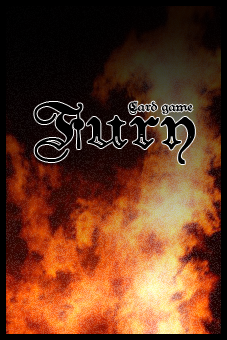
<style>
.page{position:relative;width:227px;height:340px}
.page>*{position:absolute;margin:0}
.t1{font:52px "TeutonicNo3-DemiBold";color:#000000;font-weight:bold}
.t2{font:12px "TeutonicNo1-DemiBold";color:#000000;font-weight:bold}
</style>
<div class="page">
<p class="t1" style="left:34px;top:102px;width:161px;height:62px">Fury</p>
<p class="t2" style="left:128px;top:101px;width:65px;height:14px">Card game</p>
</div>
